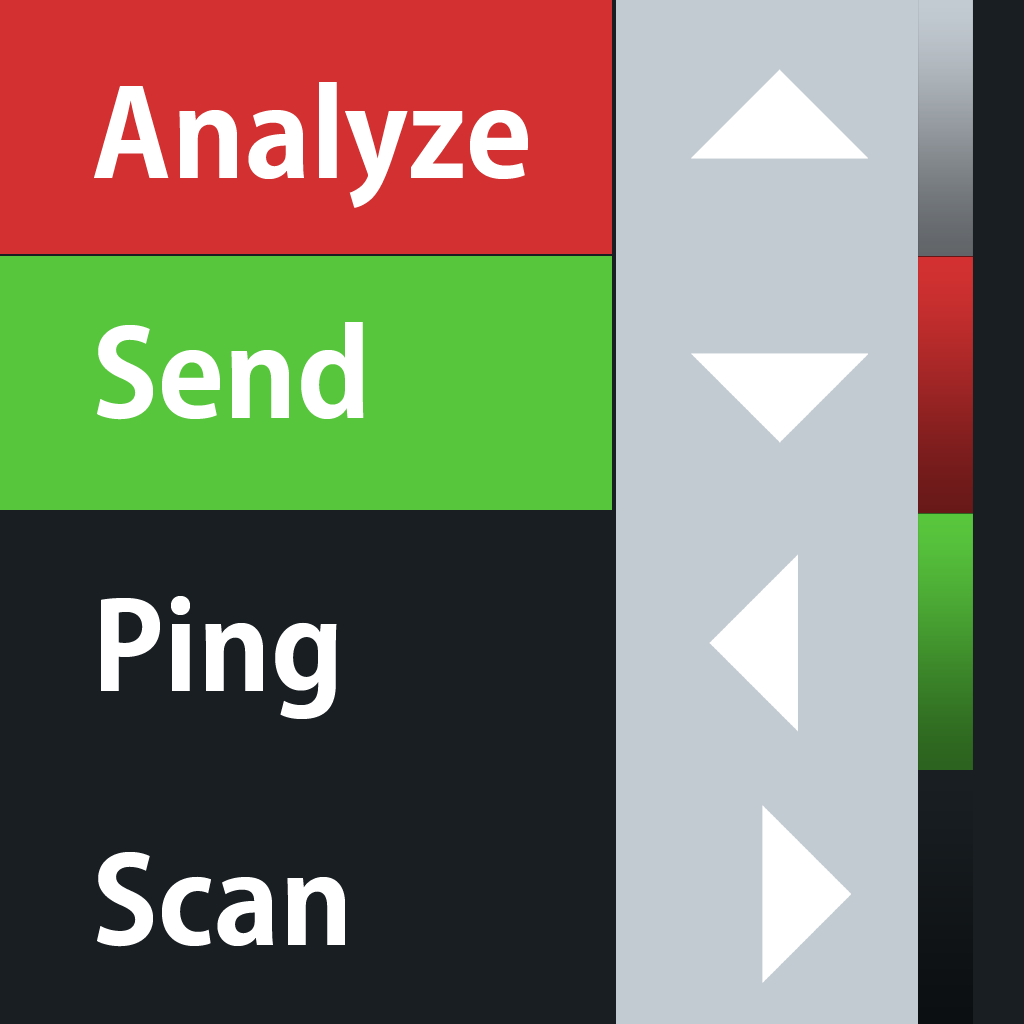
<style>
.page{position:relative;width:1024px;height:1024px;background:#181e22}
.page>*{position:absolute;margin:0}
.t1{font:120px "KozGoPro-Bold";color:#ffffff}
</style>
<div class="page">
<p class="t1" style="left:94px;top:82px;width:434px;height:126px">Analyze</p>
<p class="t1" style="left:97px;top:322px;width:267px;height:98px">Send</p>
<p class="t1" style="left:101px;top:596px;width:236px;height:123px">Ping</p>
<p class="t1" style="left:97px;top:852px;width:248px;height:95px">Scan</p>
</div>
